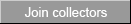
<style>
.page{position:relative;width:131px;height:24px;background:#999999}
.page>*{position:absolute;margin:0}
.t1{font:13px "ArialMT";color:#ffffff}
</style>
<div class="page">
<p class="t1" style="left:24px;top:7px;width:83px;height:10px">Join collectors</p>
</div>
